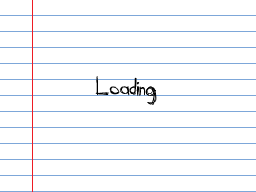
<style>
.page{position:relative;width:256px;height:192px;background:#ffffff}
.page>*{position:absolute;margin:0}
.t1{font:24px "Daubed";color:#000000}
</style>
<div class="page">
<p class="t1" style="left:95px;top:76px;width:62px;height:29px">Loading</p>
</div>
